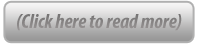
<style>
.page{position:relative;width:200px;height:45px}
.page>*{position:absolute;margin:0}
.t1{font:20.8px "MyriadPro-BoldCondIt";letter-spacing:-0.005em;color:#878484}
</style>
<div class="page">
<p class="t1" style="left:17px;top:14px;width:165px;height:17px">(Click here to read more)</p>
</div>
